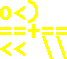
<style>
.page{position:relative;width:67px;height:59px;background:#ffffff}
.page>*{position:absolute;margin:0}
.t1{font:24px/18px "LucidaConsole";letter-spacing:0.05em;color:#ffff00;font-weight:bold;scale:0.83 1}
.t2{font:24px/18px "LucidaConsole";letter-spacing:-0.075em;color:#ffff00;font-weight:bold}
</style>
<div class="page">
<p class="t1" style="left:0px;top:0px;width:67px;height:59px">o&lt;<span class="t2">)<br></span>==+==<br>&lt;&lt; \\</p>
</div>
